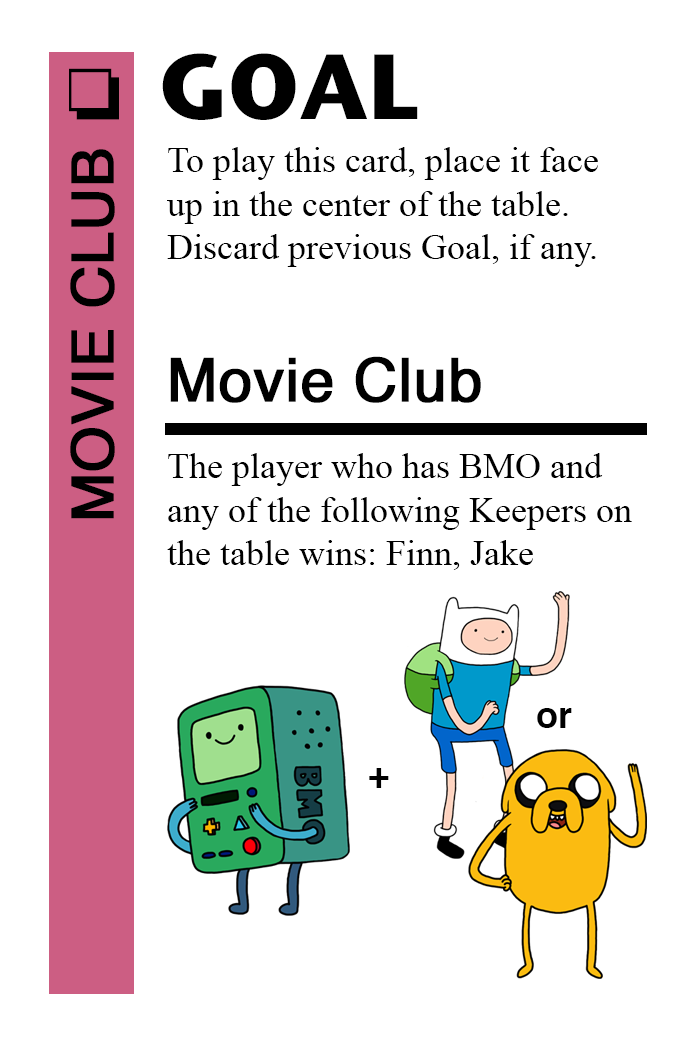
<style>
.page{position:relative;width:700px;height:1042px;background:#ffffff}
.page>*{position:absolute;margin:0}
.t1{font:92px "StoneSansITC-Bold";color:#000000}
.t2{font:72px "MS-Gothic";color:#000000}
.t3{font:58px "Helvetica";color:#000000;font-weight:bold}
.t4{font:36px "TimesNewRomanPSMT";color:#000000}
.t5{font:60px "Helvetica";color:#000000;font-weight:bold}
.t6{font:36px "Helvetica-Bold";color:#000000}
</style>
<div class="page">
<p class="t1" style="left:162px;top:53px;width:256px;height:67px">GOAL</p>
<p class="t2" style="left:69px;top:68px;width:50px;height:52px">❏</p>
<p class="t3" style="left:70px;top:149px;width:45px;height:370px;rotate:-90deg">MOVIE CLUB</p>
<p class="t4" style="left:167px;top:147px;width:431px;height:120px">To play this card, place it face<br>up in the center of the table.<br>Discard previous Goal, if any.</p>
<p class="t5" style="left:170px;top:356px;width:311px;height:47px">Movie Club</p>
<p class="t4" style="left:167px;top:453px;width:465px;height:117px">The player who has BMO and<br>any of the following Keepers on<br>the table wins: Finn, Jake</p>
<p class="t6" style="left:537px;top:708px;width:35px;height:20px">or</p>
<p class="t6" style="left:369px;top:768px;width:20px;height:20px">+</p>
</div>
